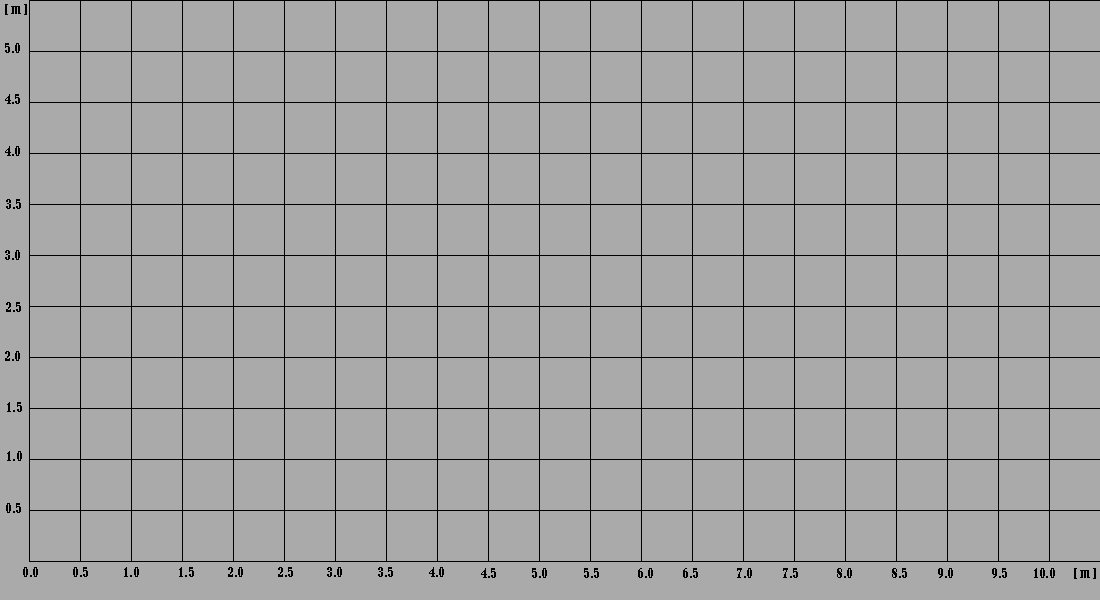
<style>
.page{position:relative;width:1100px;height:600px;background:#aaaaaa}
.page>*{position:absolute;margin:0}
.t1{font:12px "BernardMT-Condensed";letter-spacing:0.05em;color:#000000}
</style>
<div class="page">
<p class="t1" style="left:5px;top:4px;width:22px;height:11px">[ m ]</p>
<p class="t1" style="left:5px;top:43px;width:15px;height:10px">5.0</p>
<p class="t1" style="left:5px;top:94px;width:15px;height:10px">4.5</p>
<p class="t1" style="left:5px;top:146px;width:15px;height:10px">4.0</p>
<p class="t1" style="left:6px;top:199px;width:15px;height:10px">3.5</p>
<p class="t1" style="left:5px;top:250px;width:15px;height:10px">3.0</p>
<p class="t1" style="left:6px;top:302px;width:15px;height:10px">2.5</p>
<p class="t1" style="left:5px;top:351px;width:15px;height:10px">2.0</p>
<p class="t1" style="left:7px;top:402px;width:15px;height:10px">1.5</p>
<p class="t1" style="left:7px;top:451px;width:15px;height:10px">1.0</p>
<p class="t1" style="left:6px;top:503px;width:15px;height:10px">0.5</p>
<p class="t1" style="left:23px;top:567px;width:15px;height:10px">0.0</p>
<p class="t1" style="left:23px;top:567px;width:15px;height:10px">0.0</p>
<p class="t1" style="left:73px;top:567px;width:15px;height:10px">0.5</p>
<p class="t1" style="left:124px;top:567px;width:15px;height:10px">1.0</p>
<p class="t1" style="left:179px;top:567px;width:15px;height:10px">1.5</p>
<p class="t1" style="left:228px;top:567px;width:15px;height:10px">2.0</p>
<p class="t1" style="left:278px;top:567px;width:15px;height:10px">2.5</p>
<p class="t1" style="left:327px;top:567px;width:15px;height:10px">3.0</p>
<p class="t1" style="left:378px;top:567px;width:15px;height:10px">3.5</p>
<p class="t1" style="left:429px;top:567px;width:15px;height:10px">4.0</p>
<p class="t1" style="left:481px;top:568px;width:15px;height:10px">4.5</p>
<p class="t1" style="left:532px;top:568px;width:15px;height:10px">5.0</p>
<p class="t1" style="left:584px;top:568px;width:15px;height:10px">5.5</p>
<p class="t1" style="left:638px;top:568px;width:15px;height:10px">6.0</p>
<p class="t1" style="left:683px;top:568px;width:15px;height:10px">6.5</p>
<p class="t1" style="left:737px;top:568px;width:15px;height:10px">7.0</p>
<p class="t1" style="left:783px;top:568px;width:15px;height:10px">7.5</p>
<p class="t1" style="left:837px;top:568px;width:15px;height:10px">8.0</p>
<p class="t1" style="left:892px;top:568px;width:15px;height:10px">8.5</p>
<p class="t1" style="left:938px;top:568px;width:15px;height:10px">9.0</p>
<p class="t1" style="left:992px;top:568px;width:15px;height:10px">9.5</p>
<p class="t1" style="left:1034px;top:568px;width:21px;height:10px">10.0</p>
<p class="t1" style="left:1074px;top:568px;width:22px;height:11px">[ m ]</p>
</div>
